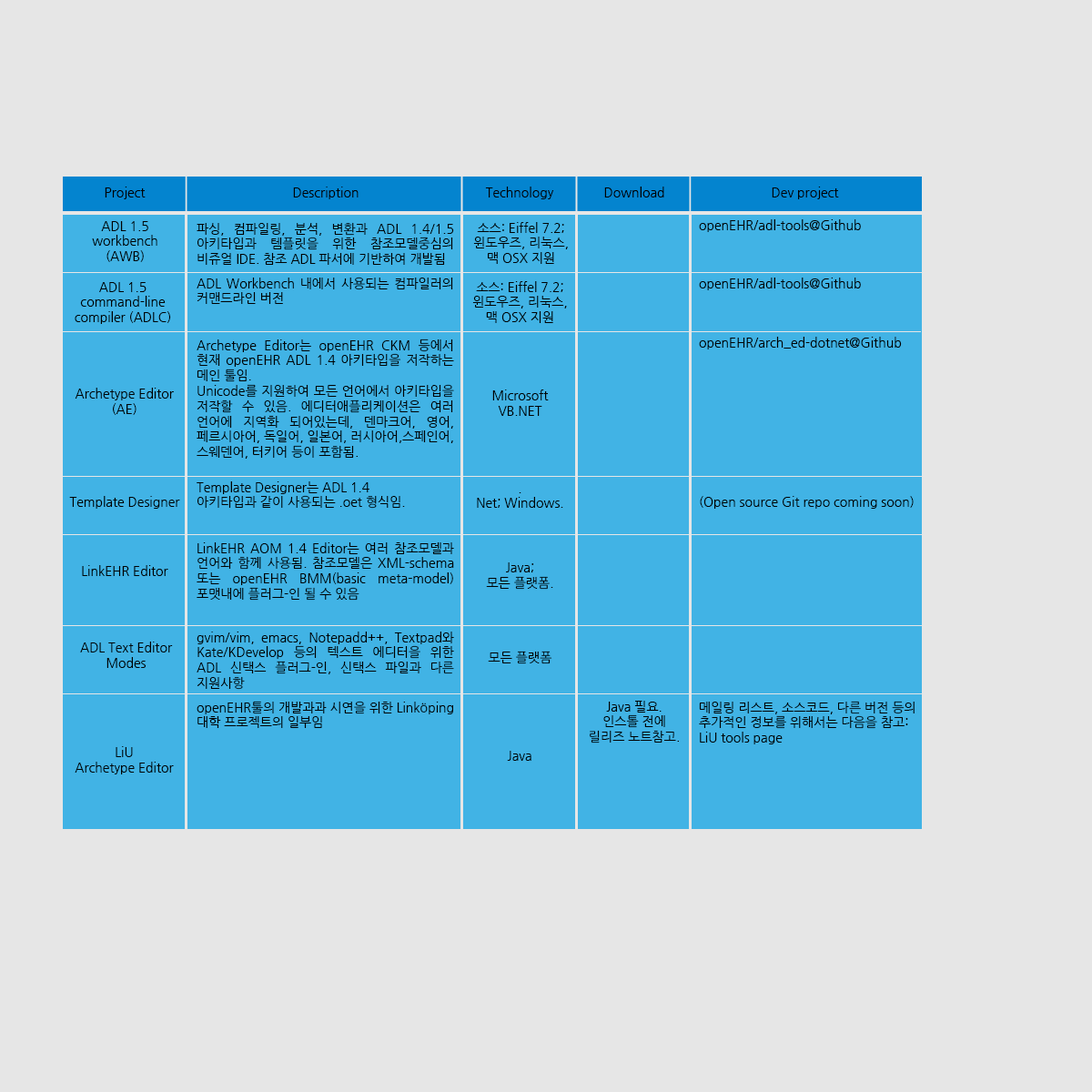
<style>
.page{position:relative;width:1092px;height:1092px;background:#e6e6e6}
.page>*{position:absolute;margin:0}
.t1{font:12.7px "NanumGothic";color:#000000}
</style>
<div class="page">
<p class="t1" style="left:105px;top:187px;width:41px;height:12px">Project</p>
<p class="t1" style="left:293px;top:187px;width:66px;height:12px">Description</p>
<p class="t1" style="left:485px;top:187px;width:69px;height:12px">Technology</p>
<p class="t1" style="left:604px;top:187px;width:60px;height:10px">Download</p>
<p class="t1" style="left:772px;top:187px;width:67px;height:12px">Dev project</p>
<p class="t1" style="left:92px;top:221px;width:65px;height:41px;text-align:center">ADL 1.5 <br>workbench<br>(AWB)</p>
<p class="t1" style="left:699px;top:219px;width:162px;height:13px">openEHR/adl-tools@Github</p>
<p class="t1" style="left:197px;top:222px;width:257px;height:43px;text-align:justify">파싱, 컴파일링, 분석, 변환과 ADL 1.4/1.5 아키타입과 템플릿을 위한 참조모델중심의 비쥬얼 IDE. 참조 ADL 파서에 기반하여 개발됨</p>
<p class="t1" style="left:473px;top:222px;width:95px;height:42px;text-align:center">소스: Eiffel 7.2; 윈도우즈, 리눅스, 맥 OSX 지원</p>
<p class="t1" style="left:197px;top:277px;width:256px;height:27px;text-align:justify">ADL Workbench 내에서 사용되는 컴파일러의 커맨드라인 버전</p>
<p class="t1" style="left:472px;top:281px;width:95px;height:42px;text-align:center">소스: Eiffel 7.2; 윈도우즈, 리눅스, 맥 OSX 지원</p>
<p class="t1" style="left:699px;top:278px;width:162px;height:12px">openEHR/adl-tools@Github</p>
<p class="t1" style="left:75px;top:282px;width:96px;height:42px;text-align:center">ADL 1.5<br>command-line<br>compiler (ADLC)</p>
<p class="t1" style="left:197px;top:339px;width:257px;height:120px;text-align:justify">Archetype Editor는 openEHR CKM 등에서 현재 openEHR ADL 1.4 아키타입을 저작하는 메인 툴임. <br>Unicode를 지원하여 모든 언어에서 아키타입을 저작할 수 있음. 에디터애플리케이션은 여러 언어에 지역화 되어있는데, 덴마크어, 영어, 페르시아어, 독일어, 일본어, 러시아어,스페인어, 스웨덴어, 터키어 등이 포함됨.</p>
<p class="t1" style="left:699px;top:337px;width:203px;height:12px">openEHR/arch_ed-dotnet@Github</p>
<p class="t1" style="left:75px;top:388px;width:99px;height:27px;text-align:center">Archetype Editor (AE)</p>
<p class="t1" style="left:492px;top:389px;width:57px;height:27px;text-align:center">Microsoft VB.NET</p>
<p class="t1" style="left:197px;top:481px;width:208px;height:28px;text-align:justify">Template Designer는 ADL 1.4 <br>아키타입과 같이 사용되는 .oet 형식임.</p>
<p class="t1" style="left:69px;top:496px;width:111px;height:13px">Template Designer</p>
<p class="t1" style="left:477px;top:492px;width:86px;height:16px;text-align:center">.<br>Net; Windows.</p>
<p class="t1" style="left:700px;top:496px;width:214px;height:13px">(Open source Git repo coming soon)</p>
<p class="t1" style="left:197px;top:542px;width:257px;height:59px;text-align:justify">LinkEHR AOM 1.4 Editor는 여러 참조모델과 언어와 함께 사용됨. 참조모델은 XML-schema 또는 openEHR BMM(basic meta-model) 포맷내에 플러그-인 될 수 있음</p>
<p class="t1" style="left:82px;top:565px;width:86px;height:11px">LinkEHR Editor</p>
<p class="t1" style="left:486px;top:562px;width:67px;height:28px;text-align:center">Java; <br>모든 플랫폼.</p>
<p class="t1" style="left:80px;top:642px;width:93px;height:26px;text-align:center">ADL Text Editor Modes</p>
<p class="t1" style="left:197px;top:632px;width:257px;height:58px;text-align:justify">gvim/vim, emacs, Notepadd++, Textpad와 Kate/KDevelop 등의 텍스트 에디터을 위한 ADL 신택스 플러그-인, 신택스 파일과 다른 지원사항</p>
<p class="t1" style="left:488px;top:651px;width:64px;height:13px">모든 플랫폼</p>
<p class="t1" style="left:197px;top:701px;width:256px;height:27px;text-align:justify">openEHR툴의 개발과과 시연을 위한 Linköping 대학 프로젝트의 일부임</p>
<p class="t1" style="left:590px;top:701px;width:89px;height:42px;text-align:center">Java 필요. <br>인스톨 전에 릴리즈 노트참고.</p>
<p class="t1" style="left:699px;top:701px;width:216px;height:43px">메일링 리스트, 소스코드, 다른 버전 등의 추가적인 정보를 위해서는 다음을 참고: LiU tools page</p>
<p class="t1" style="left:75px;top:746px;width:99px;height:28px;text-align:center">LiU <br>Archetype Editor</p>
<p class="t1" style="left:507px;top:751px;width:24px;height:10px">Java</p>
</div>
